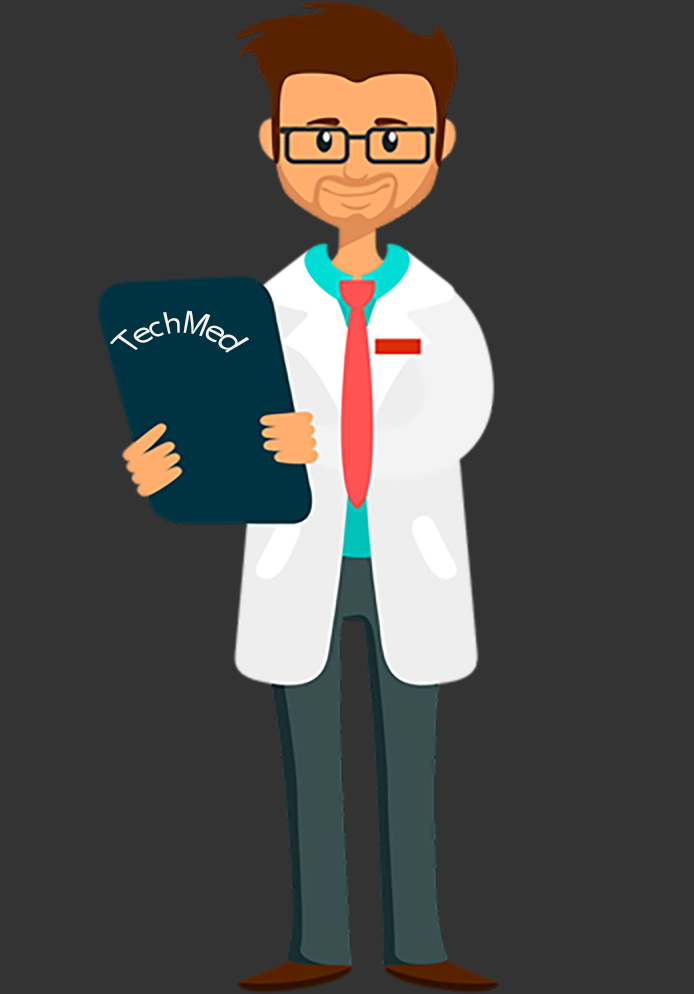
<style>
.page{position:relative;width:694px;height:994px;background:#333333}
.page>*{position:absolute;margin:0}
.t1{font:24px "MyriadPro-Regular";color:#f3f3f3}
</style>
<div class="page">
<p class="t1" style="left:110px;top:310px;width:140px;height:43px">TechMed</p>
</div>
